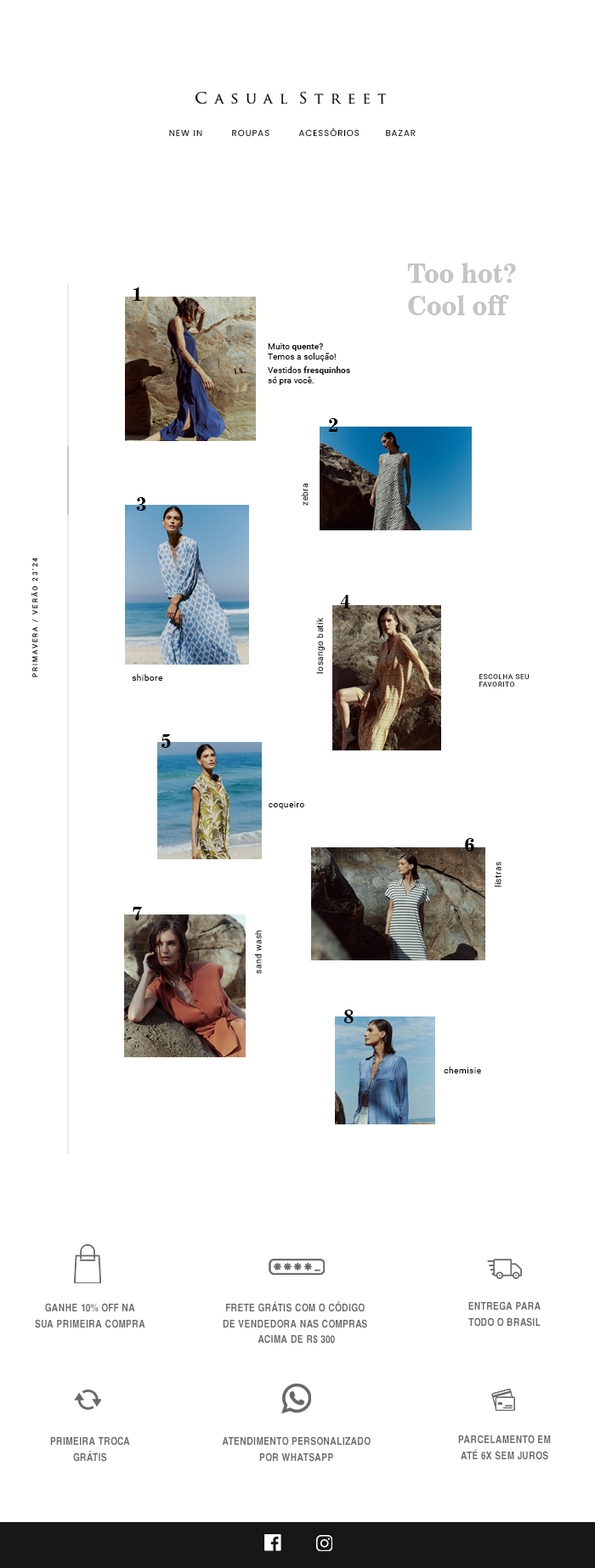
<style>
.page{position:relative;width:595px;height:1568px;background:#ffffff}
.page>*{position:absolute;margin:0}
.t1{font:8.6px "Poppins-Regular";letter-spacing:0.1em;color:#000000;text-transform:uppercase}
.t2{font:26.6px "News706BT-BoldC";color:#c5c5c5}
.t3{font:20.4px "News706BT-BoldC";letter-spacing:0.1em;color:#000000;text-transform:uppercase}
.t4{font:8.7px/10.2px "Roboto-Regular";color:#000000}
.t5{font:8.7px/10.2px "Roboto-Bold";color:#000000}
.t6{font:8.7px/13.6px "Roboto-Regular";color:#000000}
.t7{font:8.7px/13.6px "Roboto-Bold";color:#000000}
.t8{font:8.5px "Roboto-Regular";letter-spacing:0.05em}
.t9{font:6.8px "Roboto-Medium";letter-spacing:0.24em;color:#000000}
.t10{font:8.5px "Roboto-Regular";letter-spacing:0.05em;color:#000000}
.t11{font:6.8px "Roboto-Regular";letter-spacing:0.06em;text-transform:uppercase}
.t12{font:10.5px/15.5px "NimbusSanConL-Bol";letter-spacing:0.025em;color:#686868;text-transform:uppercase}
.t13{font:10.5px/15.5px "NimbusSanConL-Bol";letter-spacing:0.025em;color:#686868}
</style>
<div class="page">
<p class="t1" style="left:169px;top:127px;width:247px;height:10px">new in         roupas         acessórios        bazar</p>
<p class="t2" style="left:407px;top:263px;width:109px;height:52px">Too hot?<br>Cool off</p>
<p class="t3" style="left:133px;top:287px;width:9px;height:14px">1</p>
<p class="t4" style="left:268px;top:343px;width:82px;height:42px">Muito <span class="t5">quente?<br></span>Temos a solução! <br><span class="t6">Vestidos </span><span class="t7">fresquinhos <br></span>só pra você.</p>
<p class="t3" style="left:328px;top:418px;width:10px;height:14px">2</p>
<p class="t8" style="left:301px;top:484px;width:8px;height:22px;rotate:-90deg">zebra</p>
<p class="t3" style="left:136px;top:497px;width:10px;height:14px">3</p>
<p class="t9" style="left:31px;top:558px;width:7px;height:119px;rotate:-90deg">PRIMAVERA / VERÃO 23’24</p>
<p class="t3" style="left:340px;top:595px;width:10px;height:14px">4</p>
<p class="t10" style="left:316px;top:618px;width:9px;height:56px;rotate:-90deg">losango batik</p>
<p class="t10" style="left:132px;top:674px;width:31px;height:7px">shibore</p>
<p class="t11" style="left:479px;top:674px;width:50px;height:14px">escolha seu favorito</p>
<p class="t3" style="left:161px;top:734px;width:10px;height:14px">5</p>
<p class="t10" style="left:269px;top:801px;width:35px;height:8px">coqueiro</p>
<p class="t3" style="left:465px;top:838px;width:9px;height:14px">6</p>
<p class="t10" style="left:494px;top:862px;width:7px;height:25px;rotate:-90deg">listras</p>
<p class="t3" style="left:133px;top:907px;width:9px;height:13px">7</p>
<p class="t10" style="left:254px;top:931px;width:8px;height:43px;rotate:-90deg">sand wash</p>
<p class="t3" style="left:343px;top:1010px;width:11px;height:13px">8</p>
<p class="t10" style="left:444px;top:1067px;width:37px;height:6px">chemisie</p>
<p class="t12" style="left:223px;top:1301px;width:144px;height:43px;text-align:center">Frete Grátis com o código <br>de vendedora nas compras <br>acima de R$ 300</p>
<p class="t12" style="left:468px;top:1301px;width:73px;height:26px;text-align:center">Entrega para<br>todo o Brasil</p>
<p class="t12" style="left:35px;top:1303px;width:110px;height:25px;text-align:center">Ganhe 10% OFF na <br>sua primeira compra</p>
<p class="t13" style="left:50px;top:1436px;width:80px;height:26px;text-align:center">PRIMEIRA TROCA<br>GRÁTIS</p>
<p class="t12" style="left:222px;top:1436px;width:149px;height:26px;text-align:center">Atendimento Personalizado<br>por WhatsApp</p>
<p class="t12" style="left:458px;top:1435px;width:93px;height:25px;text-align:center">Parcelamento em<br>até 6x sem juros</p>
</div>
